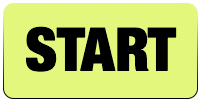
<style>
.page{position:relative;width:200px;height:100px;background:#e3f77d}
.page>*{position:absolute;margin:0}
.t1{font:60px "HelveticaNeue-CondensedBlack";color:#000000}
</style>
<div class="page">
<p class="t1" style="left:26px;top:26px;width:151px;height:46px">START</p>
</div>
